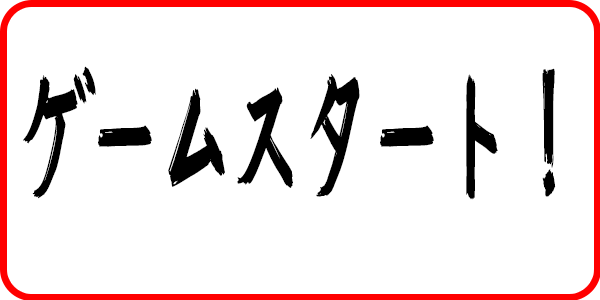
<style>
.page{position:relative;width:600px;height:300px;background:#ffffff}
.page>*{position:absolute;margin:0}
.t1{font:156.9px "AB-junglecock-01";color:#000000;scale:0.45 1}
</style>
<div class="page">
<p class="t1" style="left:23px;top:66px;width:533px;height:134px">ゲームスタート！</p>
</div>
